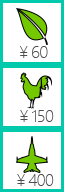
<style>
.page{position:relative;width:64px;height:192px;background:#ffffff}
.page>*{position:absolute;margin:0}
.t1{font:16px "MicrosoftYaHeiLight";letter-spacing:-0.04em;color:#4d4d4d}
</style>
<div class="page">
<p class="t1" style="left:20px;top:46px;width:28px;height:12px">￥60</p>
<p class="t1" style="left:20px;top:110px;width:34px;height:12px">￥150</p>
<p class="t1" style="left:17px;top:174px;width:37px;height:12px">￥400</p>
</div>
